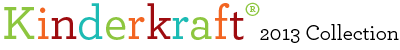
<style>
.page{position:relative;width:400px;height:50px;background:#ffffff}
.page>*{position:absolute;margin:0}
.t1{font:48.7px "Archer-Medium";color:#8dc63f}
.t2{font:48.7px "Archer-Medium";color:#f26522}
.t3{font:48.7px "Archer-Medium";color:#9e0b0f}
.t4{font:48.7px "Archer-Medium";color:#1cbbb4}
.t5{font:38.4px "Archer-Medium";color:#8dc63f}
.t6{font:36.8px "Archer-Book";color:#000000}
</style>
<div class="page">
<p class="t1" style="left:4px;top:2px;width:256px;height:38px">K<span class="t2">i</span><span class="t3">n</span><span class="t4">d</span>e<span class="t2">r</span><span class="t3">k</span><span class="t4">r</span>a<span class="t2">f</span><span class="t3">t</span><span class="t5">®</span></p>
<p class="t6" style="left:260px;top:24px;width:139px;height:19px">2013 Collection</p>
</div>
